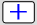
<style>
.page{position:relative;width:37px;height:25px;background:#ffffff}
.page>*{position:absolute;margin:0}
.t1{font:30px "TimesNewRomanPSMT";color:#0000ff;font-weight:bold}
</style>
<div class="page">
<p class="t1" style="left:10px;top:4px;width:17px;height:16px">+</p>
</div>
